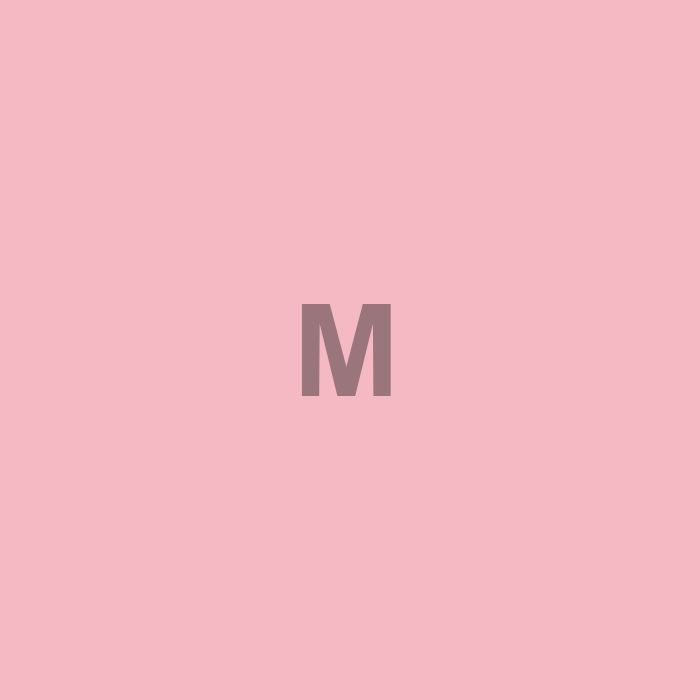
<style>
.page{position:relative;width:700px;height:700px;background:#f4b9c2}
.page>*{position:absolute;margin:0}
.t1{font:127.7px "Arial-BoldMT";color:#9a757b}
</style>
<div class="page">
<p class="t1" style="left:301px;top:304px;width:90px;height:92px">M</p>
</div>
